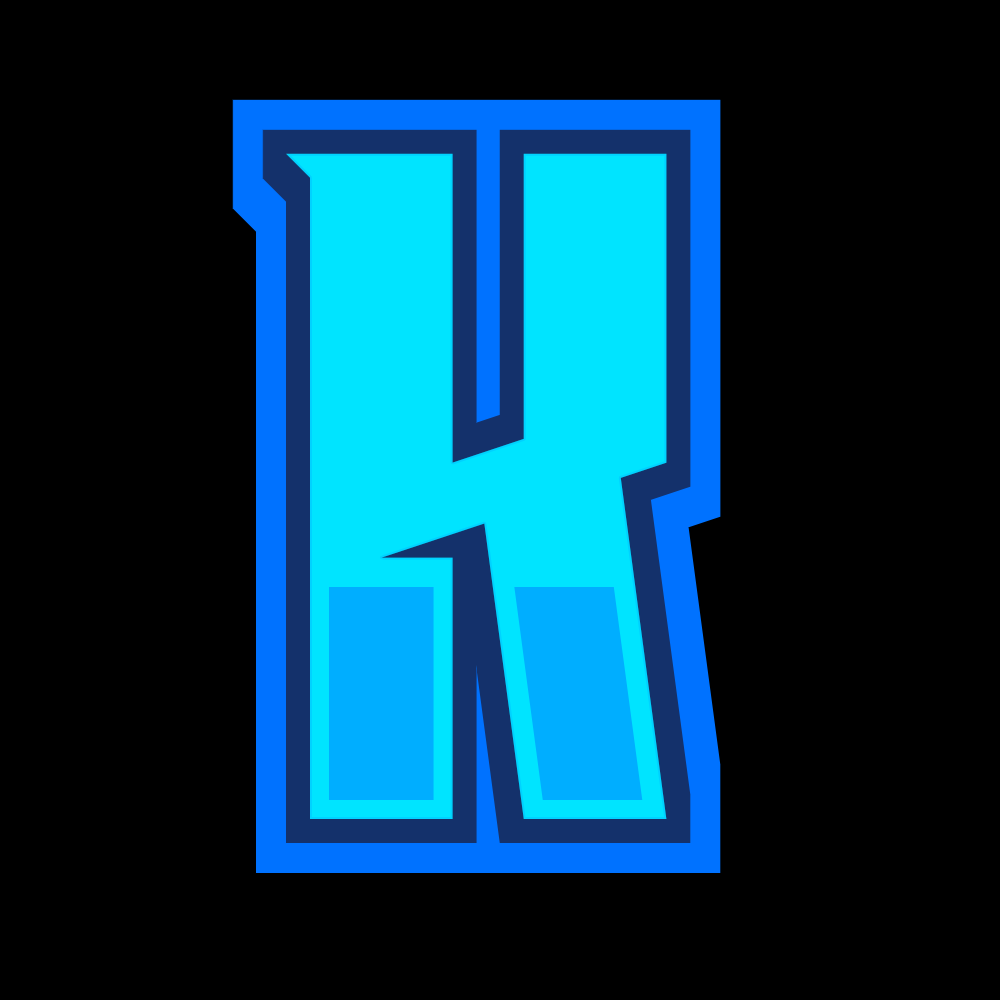
<style>
.page{position:relative;width:1000px;height:1000px;background:#000000}
.page>*{position:absolute;margin:0}
.t1{font:973.5px "Subspace";color:#00e4ff}
</style>
<div class="page">
<p class="t1" style="left:286px;top:153px;width:381px;height:666px">K</p>
</div>
